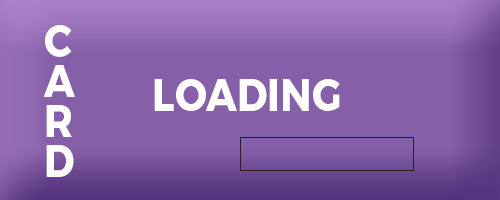
<style>
.page{position:relative;width:500px;height:200px;background:#855fa8}
.page>*{position:absolute;margin:0}
.t1{font:45px "Montserrat-Bold";color:#ffffff;scale:0.89 1}
</style>
<div class="page">
<p class="t1" style="left:43px;top:25px;width:32px;height:152px">C<br>A<br>R<br>D</p>
<p class="t1" style="left:154px;top:79px;width:186px;height:32px">LOADING</p>
</div>
